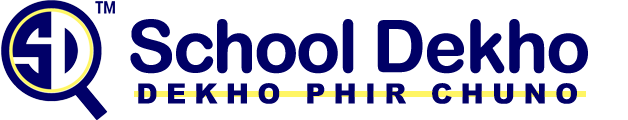
<style>
.page{position:relative;width:628px;height:120px;background:#ffffff}
.page>*{position:absolute;margin:0}
.t1{font:72px "ArialRoundedMTBold";letter-spacing:-0.05em;color:#000066;font-weight:bold}
.t2{font:28px "Arial-Black";letter-spacing:0.26em;color:#010068;text-transform:uppercase}
</style>
<div class="page">
<p class="t1" style="left:130px;top:19px;width:458px;height:55px">School Dekho</p>
<p class="t2" style="left:138px;top:83px;width:439px;height:21px">Dekho Phir Chuno</p>
</div>
